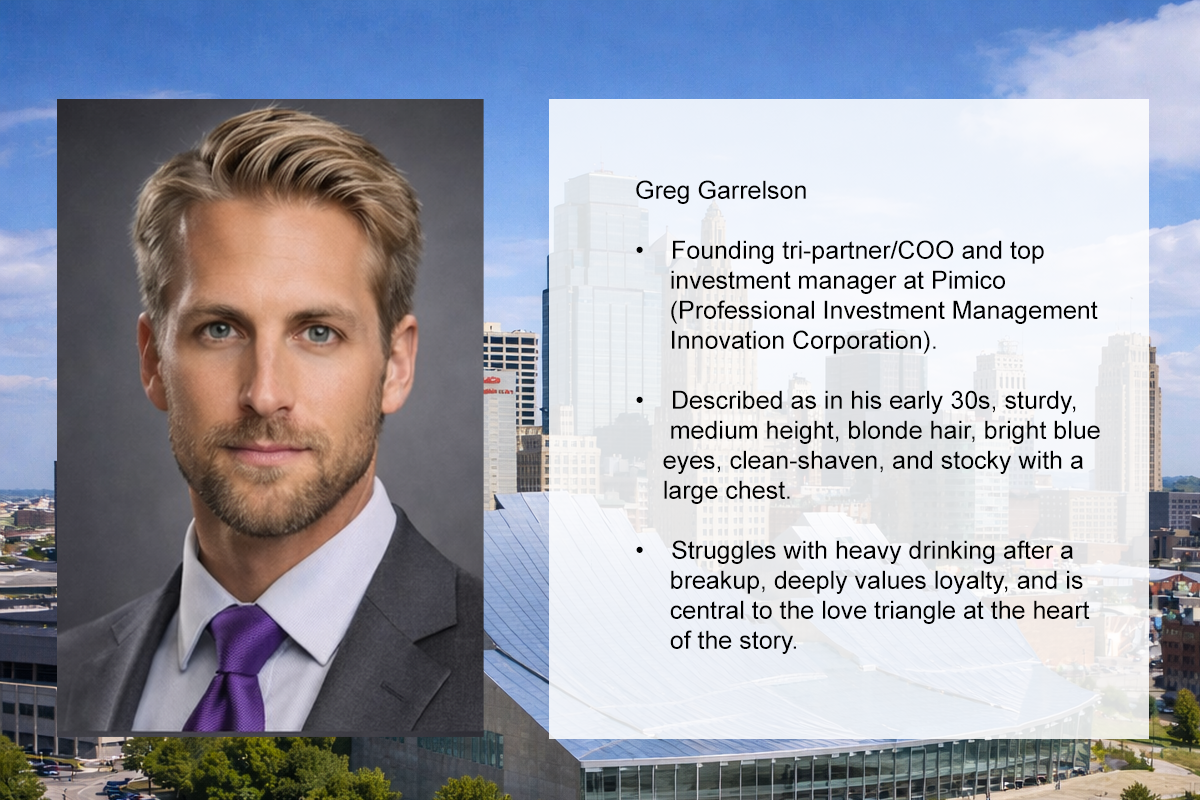
<style>
.page{position:relative;width:1200px;height:800px}
.page>*{position:absolute;margin:0}
.t1{font:25px "ArialMT";color:#000000}
</style>
<div class="page">
<p class="t1" style="left:636px;top:180px;width:464px;height:474px">Greg Garrelson<br><br>• Founding tri-partner/COO and top <br>     investment manager at Pimico <br>     (Professional Investment Management <br>     Innovation Corporation).<br><br>• Described as in his early 30s, sturdy, <br>     medium height, blonde hair, bright blue <br>    eyes, clean-shaven, and stocky with a <br>    large chest.<br><br>• Struggles with heavy drinking after a <br>     breakup, deeply values loyalty, and is <br>     central to the love triangle at the heart <br>     of the story.</p>
</div>
